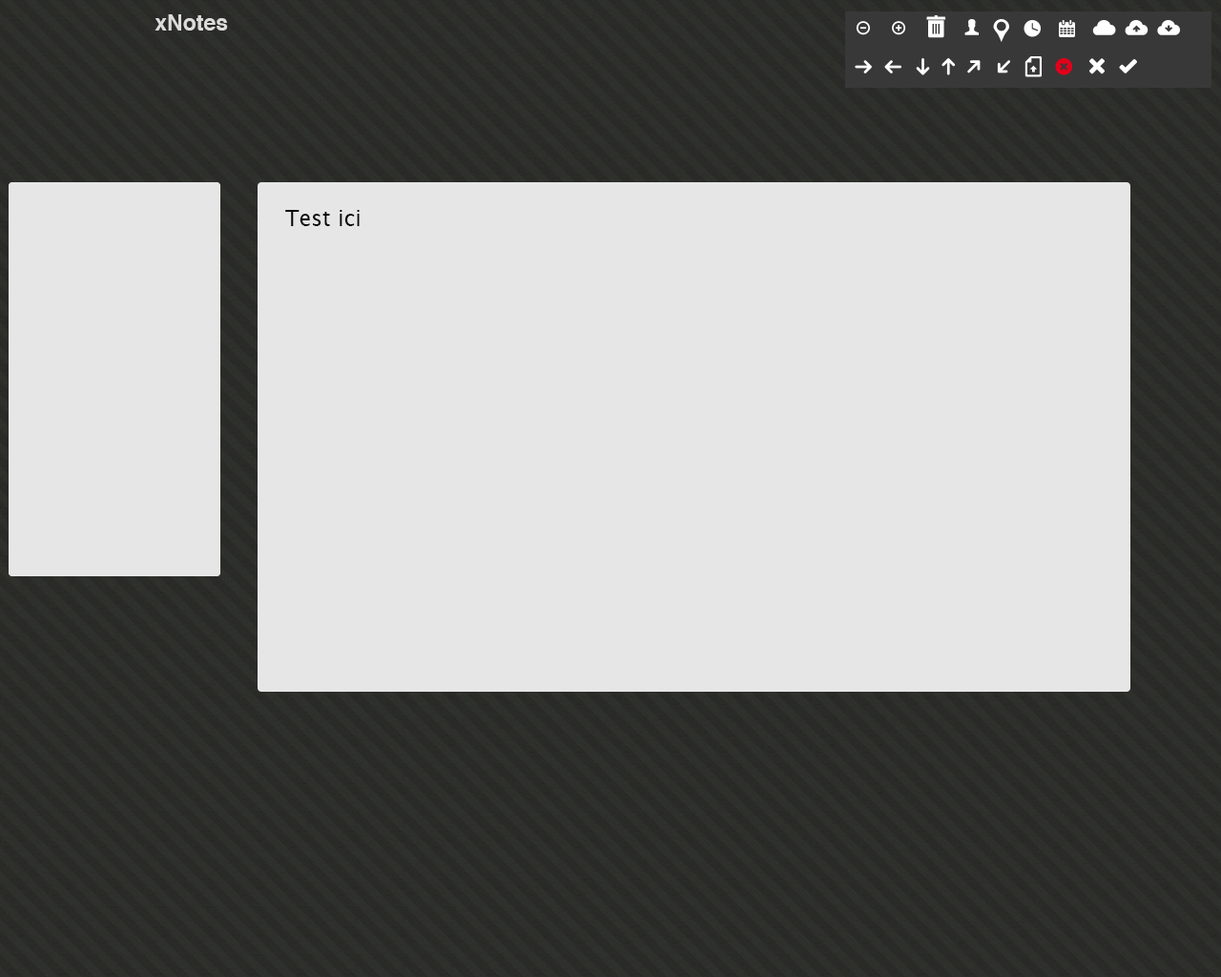
<style>
.page{position:relative;width:1221px;height:977px;background:#e6e6e6}
.page>*{position:absolute;margin:0}
.t1{font:21.9px "Helvetica-Bold";color:#dcdcdc}
.t2{font:21.9px "LucidaSans";color:#070707}
</style>
<div class="page">
<p class="t1" style="left:155px;top:14px;width:73px;height:17px">xNotes</p>
<p class="t2" style="left:285px;top:210px;width:75px;height:16px">Test ici</p>
</div>
